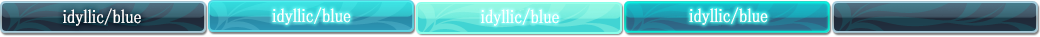
<style>
.page{position:relative;width:1040px;height:37px}
.page>*{position:absolute;margin:0}
.t1{font:19px "MS-PMincho";color:#ffffff;font-weight:bold;scale:0.84 1}
</style>
<div class="page">
<p class="t1" style="left:63px;top:8px;width:78px;height:18px">idyllic/blue</p>
<p class="t1" style="left:272px;top:7px;width:79px;height:18px">idyllic/blue</p>
<p class="t1" style="left:481px;top:8px;width:78px;height:18px">idyllic/blue</p>
<p class="t1" style="left:689px;top:7px;width:79px;height:18px">idyllic/blue</p>
</div>
